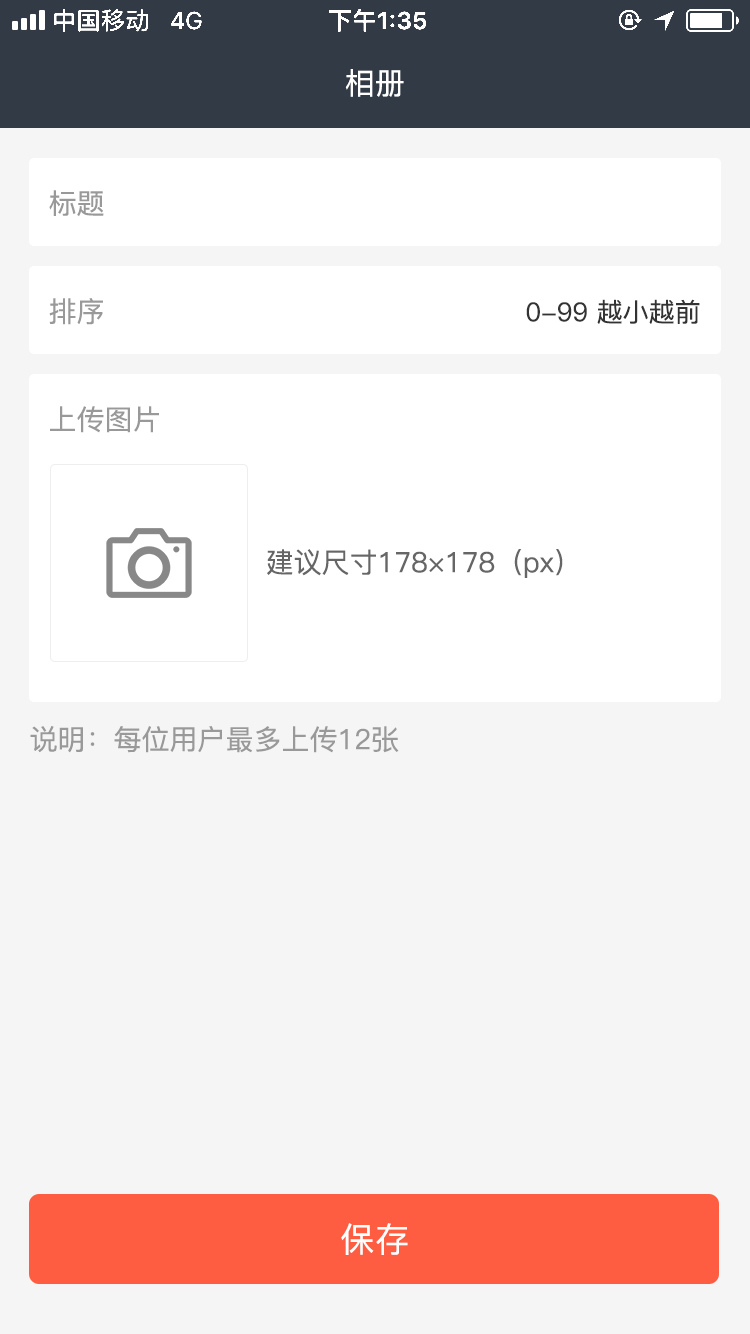
<style>
.page{position:relative;width:750px;height:1334px;background:#f5f5f5}
.page>*{position:absolute;margin:0}
.t1{font:30px "PingFang-SC-Medium";color:#ffffff}
.t2{font:28px "PingFang-SC-Medium";color:#999999}
.t3{font:26px "PingFang-SC-Medium";color:#333333}
.t4{font:28px "PingFang-SC-Medium";color:#666666}
.t5{font:34px "PingFang-SC-Medium";letter-spacing:0.02em;color:#ffffff}
</style>
<div class="page">
<p class="t1" style="left:345px;top:69px;width:59px;height:28px">相册</p>
<p class="t2" style="left:49px;top:190px;width:55px;height:27px">标题</p>
<p class="t2" style="left:49px;top:298px;width:54px;height:27px">排序</p>
<p class="t3" style="left:526px;top:299px;width:174px;height:25px">0-99 越小越前</p>
<p class="t2" style="left:50px;top:406px;width:109px;height:27px">上传图片</p>
<p class="t4" style="left:267px;top:549px;width:296px;height:29px">建议尺寸178×178（px）</p>
<p class="t2" style="left:30px;top:726px;width:369px;height:27px">说明：每位用户最多上传12张</p>
<p class="t5" style="left:341px;top:1223px;width:67px;height:32px">保存</p>
</div>
